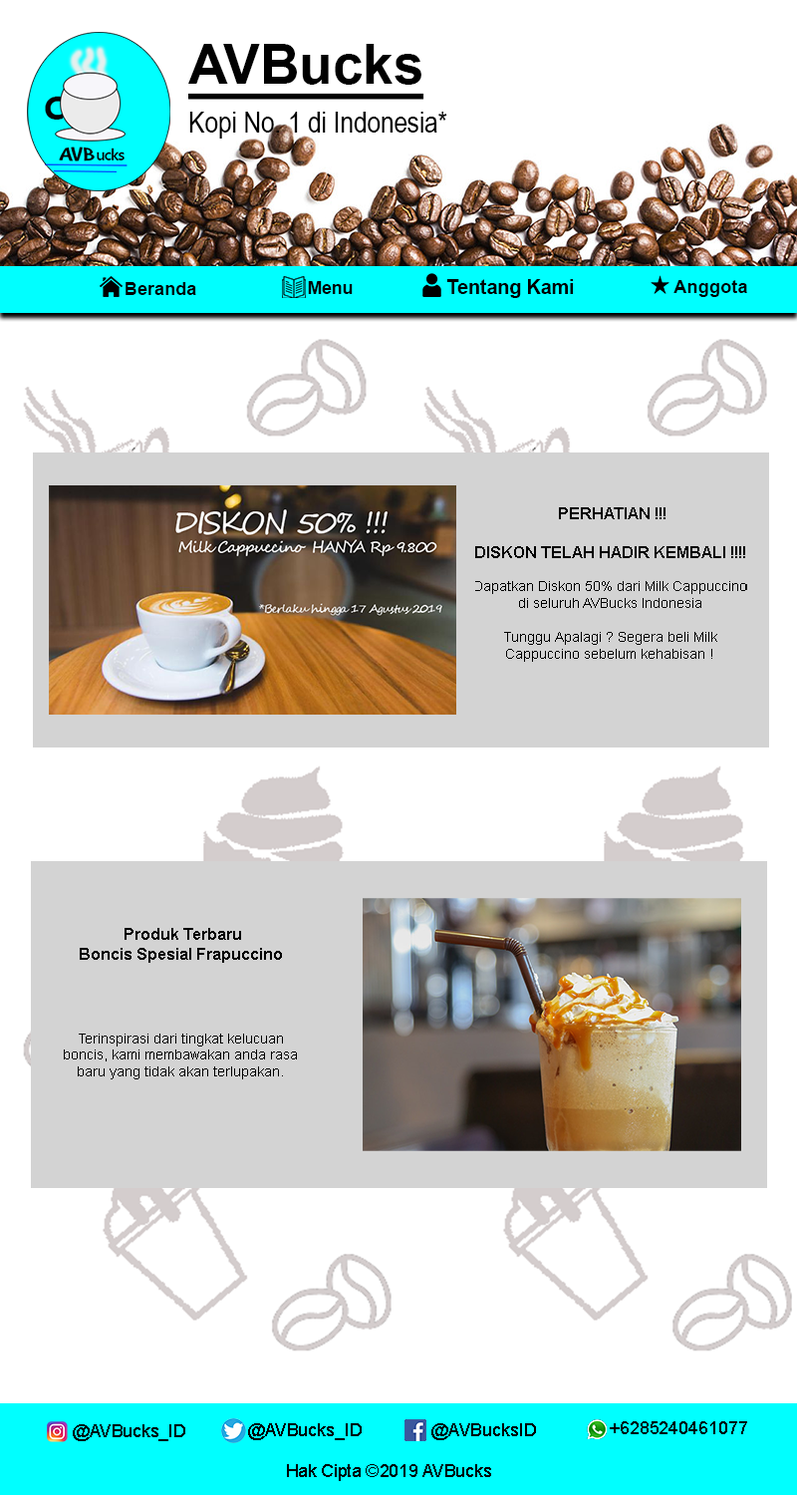
<style>
.page{position:relative;width:797px;height:1495px;background:#ffffff}
.page>*{position:absolute;margin:0}
.t1{font:54.5px "Arial-BoldMT";color:#010101;text-decoration:underline}
.t2{font:29.4px "ArialNarrow";color:#010101}
.t3{font:17.5px "Arial-BoldMT";color:#000000}
.t4{font:19.5px "Arial-BoldMT";color:#000000}
.t5{font:18.3px "Arial-BoldMT";color:#000000}
.t6{font:17.7px "Arial-BoldMT";color:#000000}
.t7{font:14px "ArialMT";color:#000000}
.t8{font:16px "Arial-BoldMT";color:#000000}
.t9{font:17.5px "ArialMT";color:#000000}
.t10{font:17.6px "ArialMT";color:#000000}
.t11{font:17.7px "ArialMT";color:#000000}
</style>
<div class="page">
<p class="t1" style="left:188px;top:44px;width:237px;height:56px">AVBucks</p>
<p class="t2" style="left:189px;top:112px;width:259px;height:27px">Kopi No. 1 di Indonesia*</p>
<p class="t3" style="left:308px;top:281px;width:45px;height:13px">Menu</p>
<p class="t4" style="left:447px;top:279px;width:127px;height:19px">Tentang Kami</p>
<p class="t5" style="left:674px;top:280px;width:74px;height:17px">Anggota</p>
<p class="t6" style="left:126px;top:282px;width:70px;height:13px">Beranda</p>
<p class="t7" style="left:475px;top:507px;width:273px;height:155px;text-align:center"><span class="t8"> PERHATIAN !!!<br><br>DISKON TELAH HADIR KEMBALI !!!!<br></span><br>Dapatkan Diskon 50% dari Milk Cappuccino di seluruh AVBucks Indonesia<br><br>Tunggu Apalagi ? Segera beli Milk Cappuccino sebelum kehabisan !</p>
<p class="t7" style="left:64px;top:928px;width:233px;height:152px;text-align:center"><span class="t8"> Produk Terbaru<br>Boncis Spesial Frapuccino<br></span><br><br><br><br>Terinspirasi dari tingkat kelucuan<br>boncis, kami membawakan anda rasa<br>baru yang tidak akan terlupakan.</p>
<p class="t9" style="left:610px;top:1421px;width:138px;height:13px">+6285240461077</p>
<p class="t9" style="left:73px;top:1424px;width:112px;height:17px">@AVBucks_ID</p>
<p class="t10" style="left:248px;top:1423px;width:114px;height:17px">@AVBucks_ID</p>
<p class="t11" style="left:432px;top:1423px;width:104px;height:17px">@AVBucksID</p>
<p class="t9" style="left:287px;top:1464px;width:204px;height:17px">Hak Cipta ©2019 AVBucks</p>
</div>
